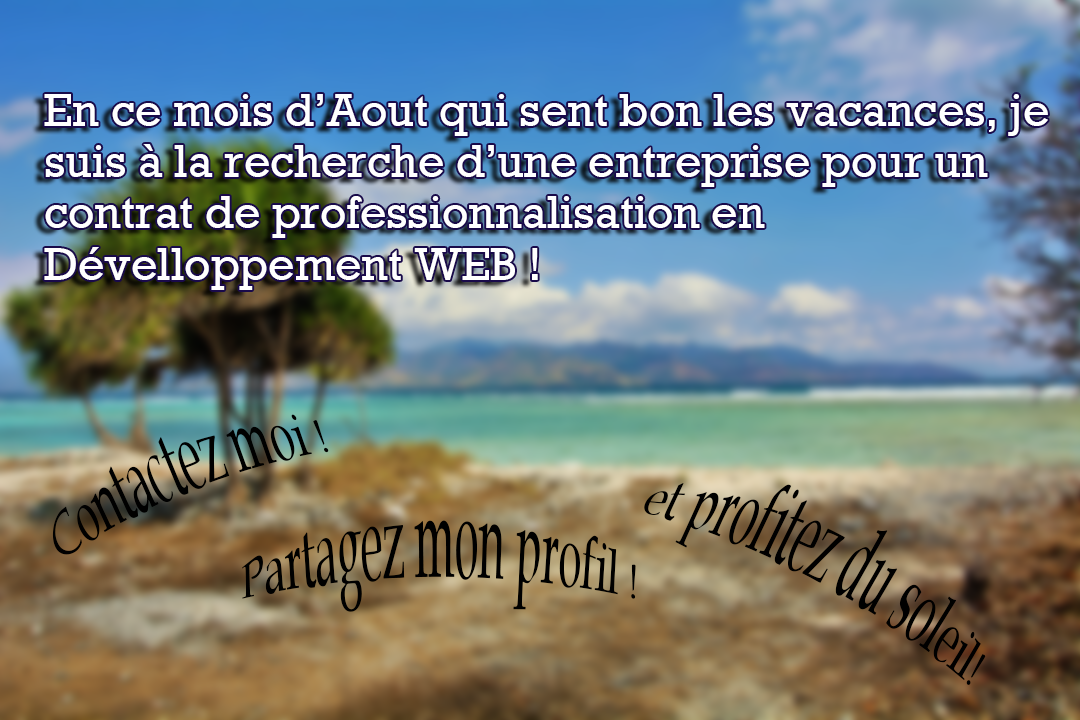
<style>
.page{position:relative;width:1080px;height:720px}
.page>*{position:absolute;margin:0}
.t1{font:42.7px "RockwellNova";color:#ffffff}
.t2{font:42.7px "BookAntiqua";color:#000000}
</style>
<div class="page">
<p class="t1" style="left:44px;top:94px;width:1004px;height:196px">En ce mois d’Aout qui sent bon les vacances, je<br>suis à la recherche d’une entreprise pour un <br>contrat de professionnalisation en <br>Dévelloppement WEB !</p>
<p class="t2" style="left:52px;top:414px;width:277px;height:141px;rotate:-22deg">Contactez moi !</p>
<p class="t2" style="left:644px;top:483px;width:342px;height:202px;rotate:28deg">et profitez du soleil!</p>
<p class="t2" style="left:242px;top:520px;width:394px;height:92px">Partagez mon profil !</p>
</div>
